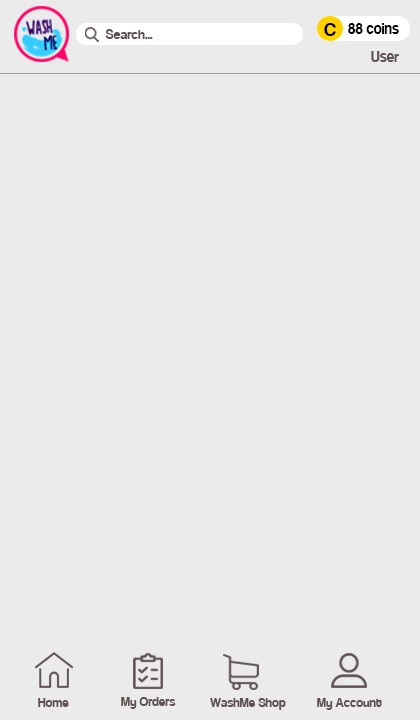
<style>
.page{position:relative;width:420px;height:720px;background:#ebebeb}
.page>*{position:absolute;margin:0}
.t1{font:14.7px "Coolvetica-Regular";color:#605252}
.t2{font:21px "Coolvetica-Regular";color:#000000}
.t3{font:17.6px "Coolvetica-Regular";color:#000000;scale:0.92 1}
.t4{font:17.6px "Coolvetica-Regular";color:#605252;scale:0.92 1}
.t5{font:14px "Coolvetica-Regular";color:#605252}
</style>
<div class="page">
<p class="t1" style="left:105px;top:29px;width:48px;height:10px">Search...</p>
<p class="t2" style="left:324px;top:23px;width:12px;height:13px">C</p>
<p class="t3" style="left:348px;top:23px;width:51px;height:11px">88 coins</p>
<p class="t4" style="left:371px;top:51px;width:28px;height:11px">User</p>
<p class="t5" style="left:38px;top:698px;width:31px;height:9px">Home</p>
<p class="t5" style="left:121px;top:697px;width:55px;height:12px">My Orders</p>
<p class="t5" style="left:210px;top:698px;width:76px;height:12px">WashMe Shop</p>
<p class="t5" style="left:317px;top:698px;width:65px;height:12px">My Account</p>
</div>
